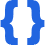
<style>
.page{position:relative;width:45px;height:45px;background:#ffffff}
.page>*{position:absolute;margin:0}
.t1{font:47px "Arial-Black";letter-spacing:0.18em;color:#2165e0}
</style>
<div class="page">
<p class="t1" style="left:0px;top:0px;width:45px;height:45px">{}</p>
</div>
